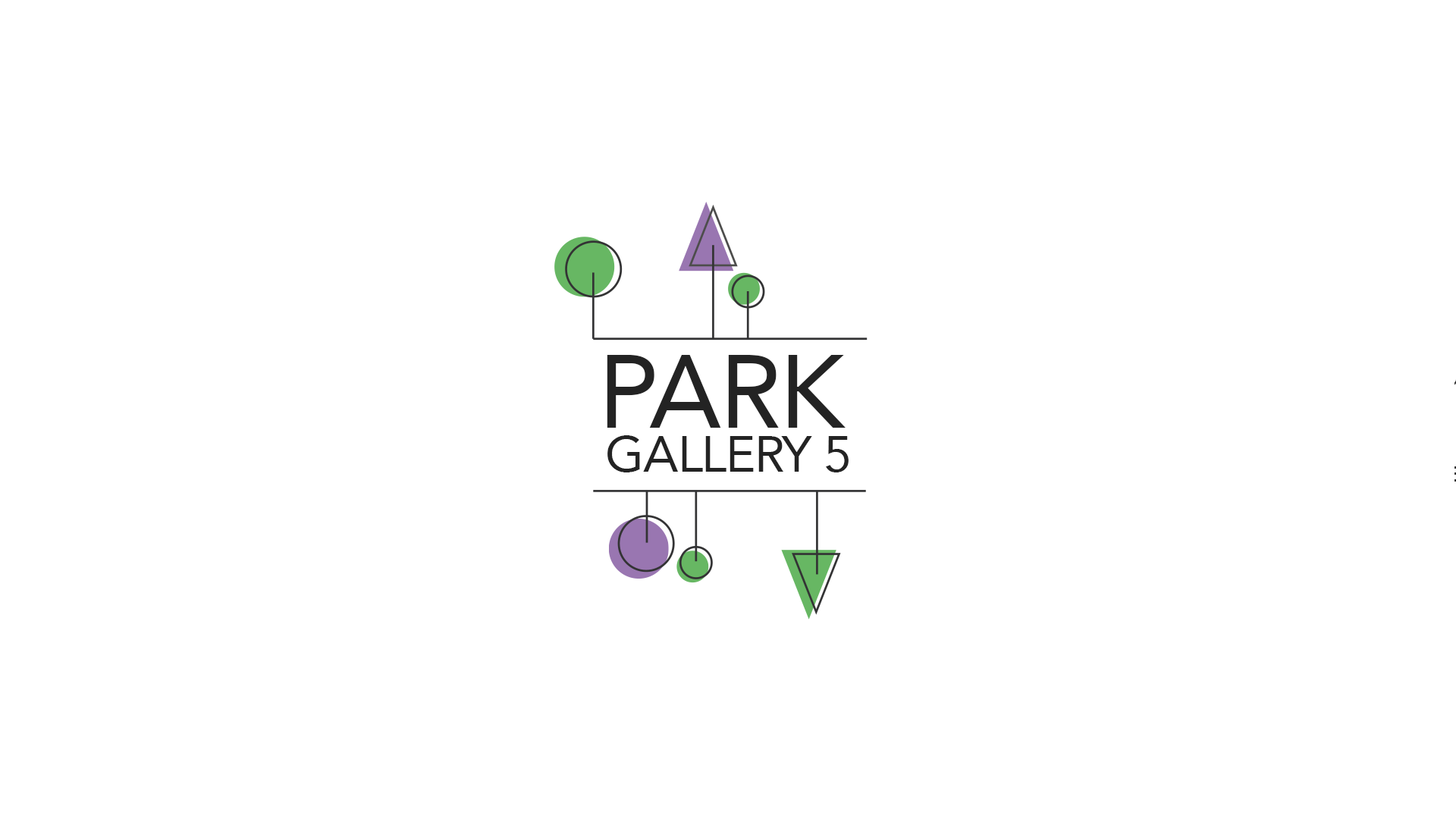
<style>
.page{position:relative;width:1456px;height:819px;background:#ffffff}
.page>*{position:absolute;margin:0}
.t1{font:102px "Avenir-Roman";letter-spacing:-0.02em;color:#232323}
.t2{font:49.9px "Avenir-Roman";letter-spacing:-0.02em;color:#232323}
</style>
<div class="page">
<p class="t1" style="left:607px;top:355px;width:239px;height:73px">PARK</p>
<p class="t2" style="left:607px;top:435px;width:242px;height:37px">GALLERY 5</p>
</div>
